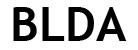
<style>
.page{position:relative;width:138px;height:50px;background:#ffffff}
.page>*{position:absolute;margin:0}
.t1{font:48px "TrebuchetMS-Bold";color:#000000}
</style>
<div class="page">
<p class="t1" style="left:13px;top:7px;width:114px;height:34px">BLDA</p>
</div>
